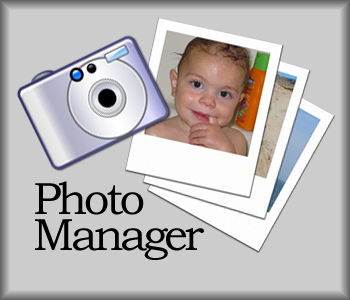
<style>
.page{position:relative;width:350px;height:300px;background:#cccccc}
.page>*{position:absolute;margin:0}
.t1{font:45.1px/36px "BookmanOldStyle";letter-spacing:-0.075em;color:#000000}
</style>
<div class="page">
<p class="t1" style="left:35px;top:181px;width:169px;height:79px">Photo <br>Manager</p>
</div>
